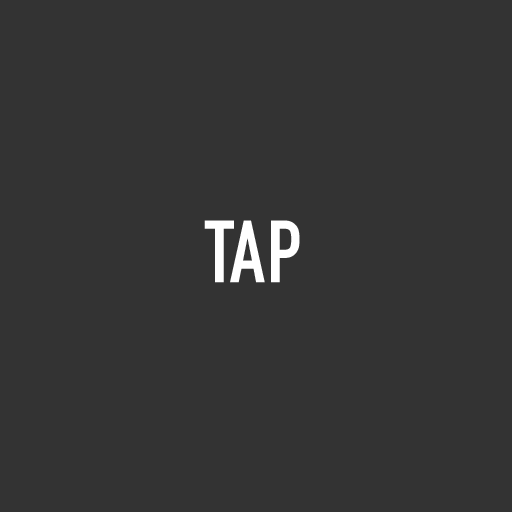
<style>
.page{position:relative;width:512px;height:512px;background:#333333}
.page>*{position:absolute;margin:0}
.t1{font:86px "DINEngschrift";color:#ffffff}
</style>
<div class="page">
<p class="t1" style="left:204px;top:220px;width:96px;height:63px">TAP</p>
</div>
